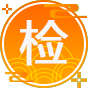
<style>
.page{position:relative;width:88px;height:88px}
.page>*{position:absolute;margin:0}
.t1{font:48px "MicrosoftYaHei";letter-spacing:0.075em;color:#f6f6f6;font-weight:bold}
</style>
<div class="page">
<p class="t1" style="left:19px;top:20px;width:50px;height:46px">检</p>
</div>
